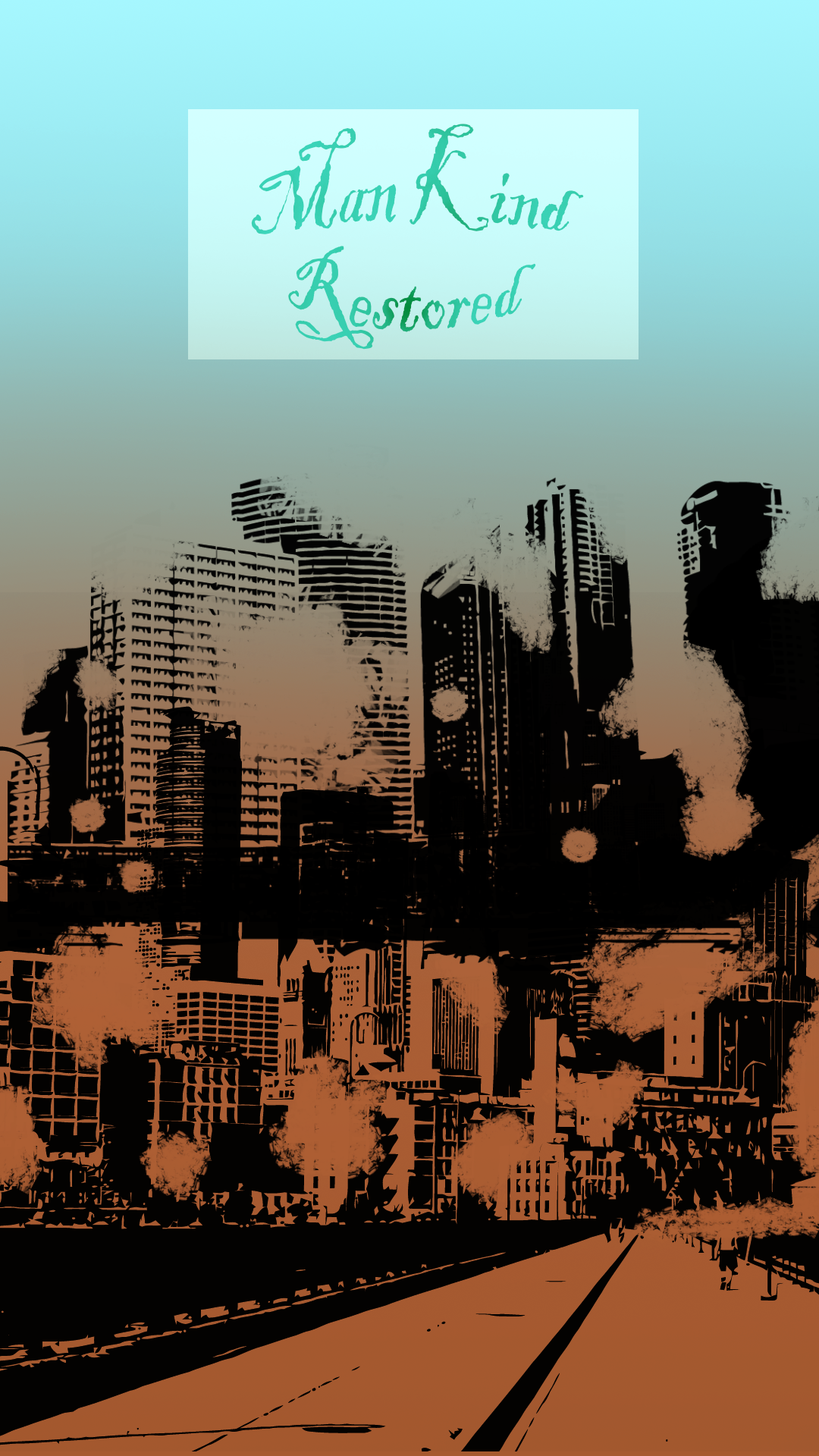
<style>
.page{position:relative;width:819px;height:1456px}
.page>*{position:absolute;margin:0}
.t1{font:75.8px "BlackadderITC-Regular";color:#38cfb0}
.t2{font:75.8px "BlackadderITC-Regular";color:#36ceae}
</style>
<div class="page">
<p class="t1" style="left:251px;top:124px;width:333px;height:110px">Man Kind</p>
<p class="t2" style="left:288px;top:246px;width:248px;height:104px">Restored</p>
</div>
